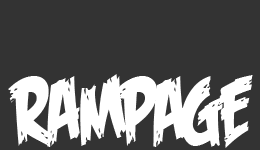
<style>
.page{position:relative;width:260px;height:150px;background:#333333}
.page>*{position:absolute;margin:0}
.t1{font:95.6px "FeastofFleshBB";color:#ffffff;scale:0.77 1}
</style>
<div class="page">
<p class="t1" style="left:8px;top:74px;width:245px;height:74px">RAMPAGE</p>
</div>
